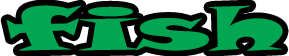
<style>
.page{position:relative;width:289px;height:56px;background:#00a651}
.page>*{position:absolute;margin:0}
.t1{font:60px "SnapITC-Regular";color:#00a651;scale:2 1}
</style>
<div class="page">
<p class="t1" style="left:6px;top:5px;width:277px;height:46px">fish</p>
</div>
